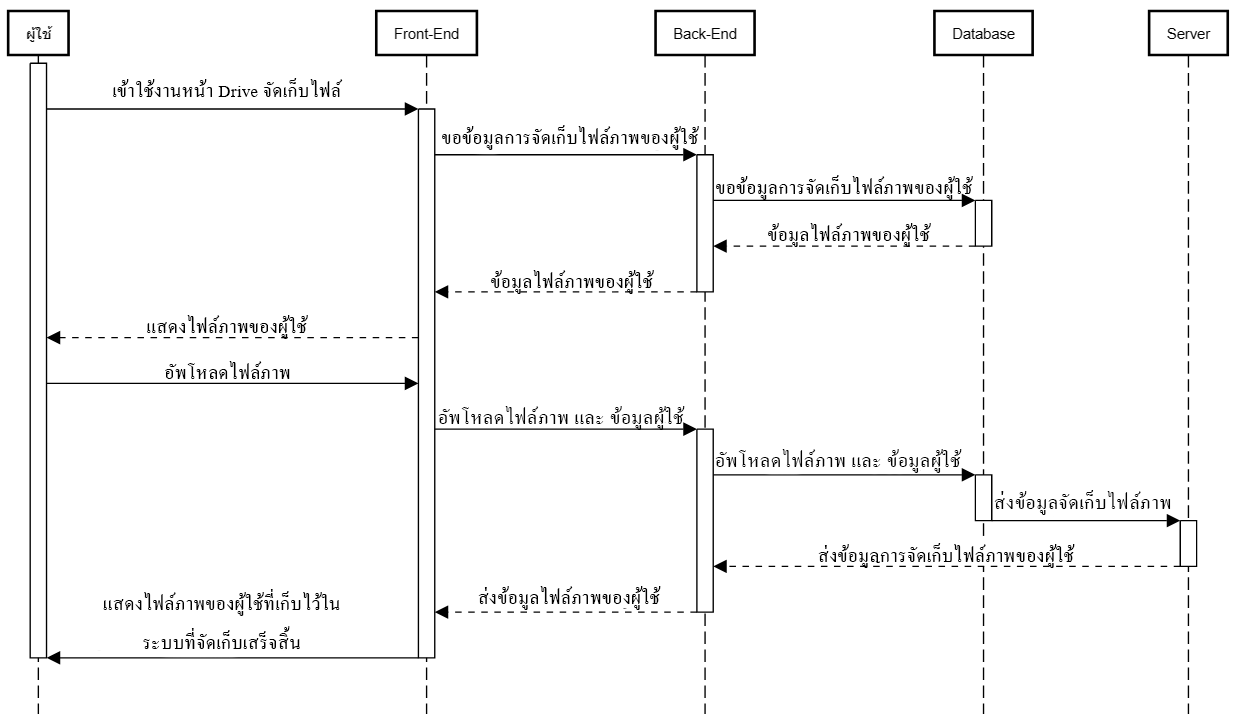
<style>
.page{position:relative;width:1235px;height:714px;background:#ffffff}
.page>*{position:absolute;margin:0}
.t1{font:25px "AngsanaNew";letter-spacing:0.02em;color:#000000}
.t2{font:26px "AngsanaNew";letter-spacing:0.02em;color:#000000}
.t3{font:25px/39px "AngsanaNew";letter-spacing:0.02em;color:#000000}
</style>
<div class="page">
<p class="t1" style="left:113px;top:78px;width:230px;height:19px">เข้าใช้งานหน้า Drive จัดเก็บไฟล์</p>
<p class="t1" style="left:442px;top:125px;width:257px;height:25px">ขอข้อมูลการจัดเก็บไฟล์ภาพของผู้ใช้</p>
<p class="t1" style="left:716px;top:175px;width:257px;height:25px">ขอข้อมูลการจัดเก็บไฟล์ภาพของผู้ใช้</p>
<p class="t1" style="left:768px;top:223px;width:163px;height:24px">ข้อมูลไฟล์ภาพของผู้ใช้</p>
<p class="t1" style="left:491px;top:270px;width:163px;height:24px">ข้อมูลไฟล์ภาพของผู้ใช้</p>
<p class="t1" style="left:147px;top:315px;width:161px;height:24px">แสดงไฟล์ภาพของผู้ใช้</p>
<p class="t1" style="left:165px;top:361px;width:125px;height:18px">อัพโหลดไฟล์ภาพ</p>
<p class="t2" style="left:438px;top:406px;width:247px;height:24px">อัพโหลดไฟล์ภาพ และ ข้อมูลผู้ใช้</p>
<p class="t2" style="left:715px;top:449px;width:247px;height:24px">อัพโหลดไฟล์ภาพ และ ข้อมูลผู้ใช้</p>
<p class="t2" style="left:994px;top:490px;width:177px;height:25px">ส่งข้อมูลจัดเก็บไฟล์ภาพ</p>
<p class="t1" style="left:818px;top:543px;width:257px;height:25px">ส่งข้อมูลการจัดเก็บไฟล์ภาพของผู้ใช้</p>
<p class="t3" style="left:103px;top:589px;width:237px;height:60px;text-align:center">แสดงไฟล์ภาพของผู้ใช้ที่เก็บไว้ใน<br>ระบบที่จัดเก็บเสร็จสิ้น</p>
<p class="t1" style="left:478px;top:586px;width:183px;height:24px">ส่งข้อมูลไฟล์ภาพของผู้ใช้</p>
</div>
